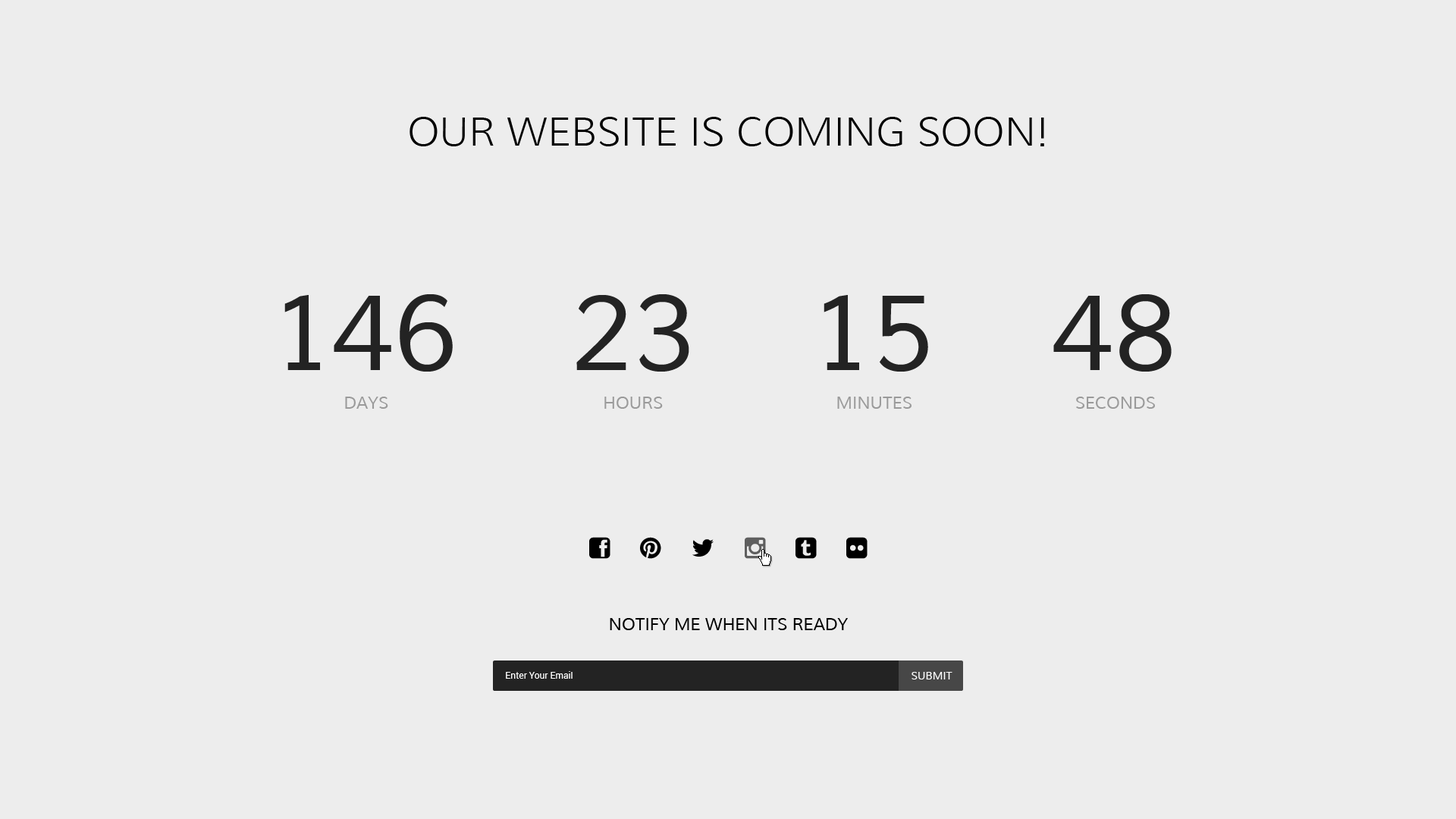
<style>
.page{position:relative;width:1456px;height:819px;background:#ededed}
.page>*{position:absolute;margin:0}
.t1{font:39.4px "Muli-Light";color:#000000;text-transform:uppercase}
.t2{font:106.9px "Muli";color:#232323;text-transform:uppercase}
.t3{font:16.7px "Muli";color:#9a9a9a;text-transform:uppercase}
.t4{font:16.7px "Muli";color:#000000;text-transform:uppercase}
.t5{font:9.1px "Roboto-Regular";color:#ffffff}
.t6{font:10.6px "Muli";color:#ffffff;text-transform:uppercase}
</style>
<div class="page">
<p class="t1" style="left:409px;top:117px;width:635px;height:29px">OUR WEBSITE IS COMING SOON!</p>
<p class="t2" style="left:284px;top:294px;width:169px;height:78px">146</p>
<p class="t2" style="left:576px;top:294px;width:113px;height:78px">23</p>
<p class="t2" style="left:824px;top:295px;width:104px;height:77px">15</p>
<p class="t2" style="left:1053px;top:294px;width:119px;height:78px">48</p>
<p class="t3" style="left:345px;top:397px;width:43px;height:12px">days</p>
<p class="t3" style="left:604px;top:397px;width:59px;height:12px">hours</p>
<p class="t3" style="left:837px;top:397px;width:75px;height:12px">Minutes</p>
<p class="t3" style="left:1076px;top:397px;width:79px;height:12px">Seconds</p>
<p class="t4" style="left:610px;top:618px;width:238px;height:12px">NOTIFY ME WHEN ITS READY</p>
<p class="t5" style="left:506px;top:671px;width:67px;height:8px">Enter Your Email</p>
<p class="t6" style="left:912px;top:672px;width:40px;height:7px">Submit</p>
</div>
